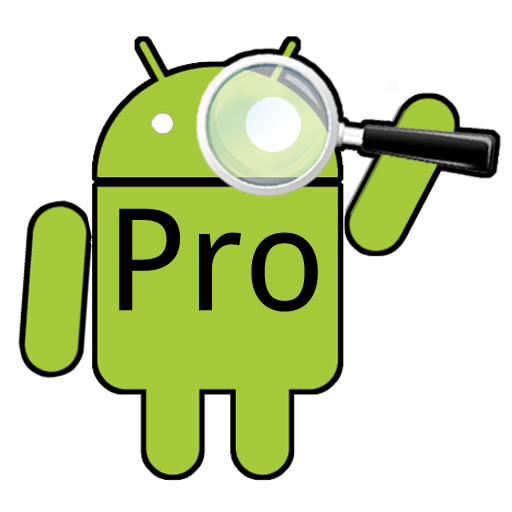
<style>
.page{position:relative;width:512px;height:512px;background:#ffffff}
.page>*{position:absolute;margin:0}
.t1{font:141.7px "DroidSans";color:#000000}
</style>
<div class="page">
<p class="t1" style="left:119px;top:208px;width:199px;height:104px">Pro</p>
</div>
